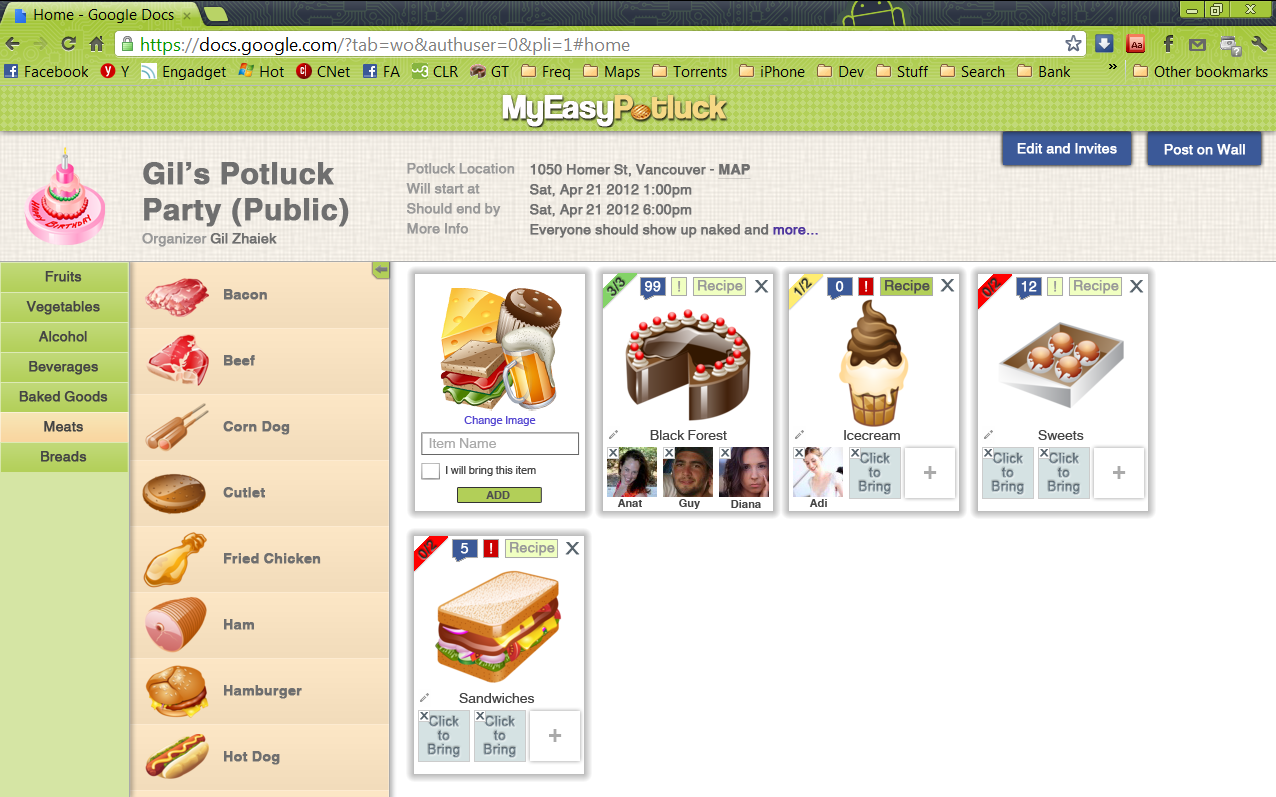
<style>
.page{position:relative;width:1276px;height:797px;background:#ffffff}
.page>*{position:absolute;margin:0}
.t1{font:14px "HelveticaWorld-Regular";color:#ffffff;font-weight:bold}
.t2{font:30px "HelveticaWorld-Bold";color:#6f6f6f;font-weight:bold}
.t3{font:14px/20px "HelveticaWorld-Regular";color:#999999;font-weight:bold}
.t4{font:14px/20px "HelveticaWorld-Regular";color:#6f6f6f;font-weight:bold}
.t5{font:14px/20px "HelveticaWorld-Bold";color:#6f6f6f;font-weight:bold;text-decoration:underline}
.t6{font:14px/20px "HelveticaWorld-Regular";color:#4e359e;font-weight:bold}
.t7{font:14px "HelveticaWorld-Regular";color:#6f6f6f;font-weight:bold}
.t8{font:14px "HelveticaWorld-Regular";color:#999999;font-weight:bold}
.t9{font:14px "HelveticaWorld-Regular";color:#444444;font-weight:bold}
.t10{font:13.3px "ArialMT";color:#2c312c;font-weight:bold}
.t11{font:14px "HelveticaWorld-Regular";color:#fffefe;font-weight:bold}
.t12{font:14px "HelveticaWorld-Regular";color:#4f4f4f;font-weight:bold}
.t13{font:14px "HelveticaWorld-Bold";color:#6f6f6f;font-weight:bold}
.t14{font:11px "HelveticaWorld-Regular";color:#5446d1}
.t15{font:14px "HelveticaWorld-Regular";color:#aaaaaa}
.t16{font:14px "HelveticaWorld-Regular";color:#444444}
.t17{font:11px "HelveticaWorld-Regular";color:#444444}
.t18{font:24px "HelveticaWorld-Bold";color:#aaaaaa}
.t19{font:11px "HelveticaWorld-Bold";color:#4f4f4f}
.t20{font:11px "HelveticaWorld-Bold";color:#444444}
</style>
<div class="page">
<p class="t1" style="left:1017px;top:143px;width:100px;height:11px">Edit and Invites</p>
<p class="t1" style="left:1164px;top:144px;width:81px;height:11px">Post on Wall</p>
<p class="t2" style="left:143px;top:162px;width:206px;height:65px">Gil’s Potluck<br>Party (Public)</p>
<p class="t3" style="left:406px;top:163px;width:109px;height:71px">Potluck Location<br>Will start at<br>Should end by<br>More Info</p>
<p class="t4" style="left:530px;top:164px;width:288px;height:74px">1050 Homer St, Vancouver - <span class="t5">MAP<br></span>Sat, Apr 21 2012 1:00pm<br>Sat, Apr 21 2012 6:00pm<br>Everyone should show up naked and <span class="t6">more...</span></p>
<p class="t7" style="left:142px;top:233px;width:135px;height:14px"><span class="t8">Organizer</span> Gil Zhaiek</p>
<p class="t9" style="left:45px;top:271px;width:37px;height:11px">Fruits</p>
<p class="t10" style="left:607px;top:277px;width:18px;height:20px;rotate:-45deg">3/3</p>
<p class="t1" style="left:645px;top:281px;width:16px;height:11px">99</p>
<p class="t8" style="left:678px;top:281px;width:3px;height:11px">!</p>
<p class="t8" style="left:698px;top:280px;width:45px;height:14px">Recipe</p>
<p class="t10" style="left:794px;top:278px;width:18px;height:18px;rotate:-45deg">1/2</p>
<p class="t1" style="left:835px;top:281px;width:9px;height:11px">0</p>
<p class="t11" style="left:865px;top:281px;width:3px;height:11px">!</p>
<p class="t12" style="left:885px;top:280px;width:45px;height:14px">Recipe</p>
<p class="t10" style="left:982px;top:278px;width:19px;height:19px;rotate:-45deg">0/2</p>
<p class="t1" style="left:1021px;top:281px;width:16px;height:11px">12</p>
<p class="t8" style="left:1054px;top:281px;width:3px;height:11px">!</p>
<p class="t8" style="left:1074px;top:280px;width:45px;height:14px">Recipe</p>
<p class="t13" style="left:224px;top:289px;width:43px;height:11px">Bacon</p>
<p class="t9" style="left:26px;top:301px;width:74px;height:14px">Vegetables</p>
<p class="t9" style="left:38px;top:331px;width:49px;height:11px">Alcohol</p>
<p class="t9" style="left:29px;top:361px;width:69px;height:14px">Beverages</p>
<p class="t13" style="left:224px;top:355px;width:31px;height:11px">Beef</p>
<p class="t9" style="left:19px;top:391px;width:89px;height:11px">Baked Goods</p>
<p class="t9" style="left:44px;top:421px;width:39px;height:11px">Meats</p>
<p class="t13" style="left:223px;top:421px;width:67px;height:14px">Corn Dog</p>
<p class="t14" style="left:464px;top:416px;width:72px;height:10px">Change Image</p>
<p class="t15" style="left:429px;top:438px;width:68px;height:10px">Item Name</p>
<p class="t16" style="left:650px;top:430px;width:77px;height:10px">Black Forest</p>
<p class="t16" style="left:844px;top:430px;width:56px;height:10px">Icecream</p>
<p class="t16" style="left:1038px;top:430px;width:46px;height:10px">Sweets</p>
<p class="t9" style="left:41px;top:451px;width:46px;height:11px">Breads</p>
<p class="t17" style="left:446px;top:466px;width:90px;height:10px">I will bring this item</p>
<p class="t18" style="left:924px;top:466px;width:13px;height:13px">+</p>
<p class="t18" style="left:1113px;top:466px;width:13px;height:13px">+</p>
<p class="t13" style="left:223px;top:487px;width:42px;height:11px">Cutlet</p>
<p class="t19" style="left:486px;top:491px;width:24px;height:8px">ADD</p>
<p class="t20" style="left:617px;top:499px;width:25px;height:8px">Anat</p>
<p class="t20" style="left:679px;top:499px;width:21px;height:10px">Guy</p>
<p class="t20" style="left:731px;top:500px;width:30px;height:8px">Diana</p>
<p class="t20" style="left:809px;top:499px;width:18px;height:8px">Adi</p>
<p class="t10" style="left:418px;top:540px;width:19px;height:19px;rotate:-45deg">0/2</p>
<p class="t1" style="left:460px;top:543px;width:9px;height:11px">5</p>
<p class="t11" style="left:490px;top:543px;width:3px;height:11px">!</p>
<p class="t8" style="left:510px;top:542px;width:45px;height:14px">Recipe</p>
<p class="t13" style="left:224px;top:553px;width:97px;height:11px">Fried Chicken</p>
<p class="t13" style="left:224px;top:619px;width:30px;height:11px">Ham</p>
<p class="t13" style="left:224px;top:685px;width:78px;height:14px">Hamburger</p>
<p class="t16" style="left:459px;top:693px;width:76px;height:10px">Sandwiches</p>
<p class="t18" style="left:549px;top:729px;width:13px;height:13px">+</p>
<p class="t13" style="left:224px;top:751px;width:56px;height:14px">Hot Dog</p>
</div>
